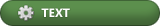
<style>
.page{position:relative;width:160px;height:26px}
.page>*{position:absolute;margin:0}
.t1{font:12px "Ebrima-Bold";color:#ffffff;text-transform:uppercase}
</style>
<div class="page">
<p class="t1" style="left:41px;top:8px;width:29px;height:9px">Text</p>
</div>
